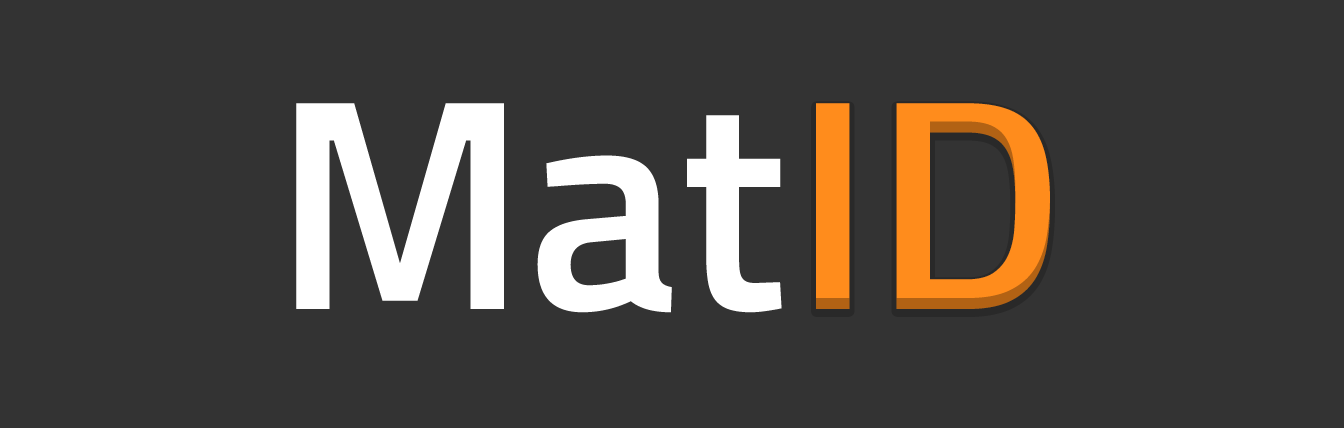
<style>
.page{position:relative;width:1344px;height:428px;background:#333333}
.page>*{position:absolute;margin:0}
.t1{font:300px "Sunflower-Medium";color:#ffffff}
.t2{font:300px "Sunflower-Medium";color:#ff8c1c}
</style>
<div class="page">
<p class="t1" style="left:296px;top:103px;width:486px;height:210px">Mat</p>
<p class="t2" style="left:816px;top:103px;width:234px;height:206px">ID</p>
</div>
